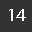
<style>
.page{position:relative;width:32px;height:32px;background:#333333}
.page>*{position:absolute;margin:0}
.t1{font:17.8px "MyriadPro-Regular";color:#ffffff;scale:1.12 1}
</style>
<div class="page">
<p class="t1" style="left:9px;top:9px;width:17px;height:12px">14</p>
</div>
